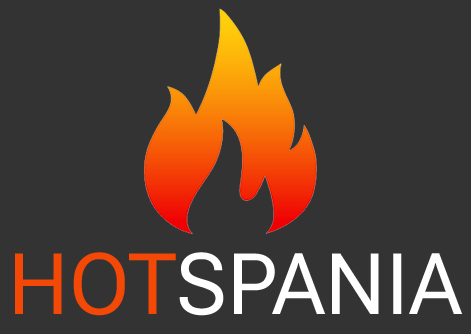
<style>
.page{position:relative;width:471px;height:334px;background:#333333}
.page>*{position:absolute;margin:0}
.t1{font:85px "RobotoFlex-Regular";color:#ffffff}
.t2{font:85px "RobotoFlex-Regular";color:#f44806}
</style>
<div class="page">
<p class="t1" style="left:15px;top:252px;width:448px;height:64px"><span class="t2">HOT</span>SPANIA</p>
</div>
